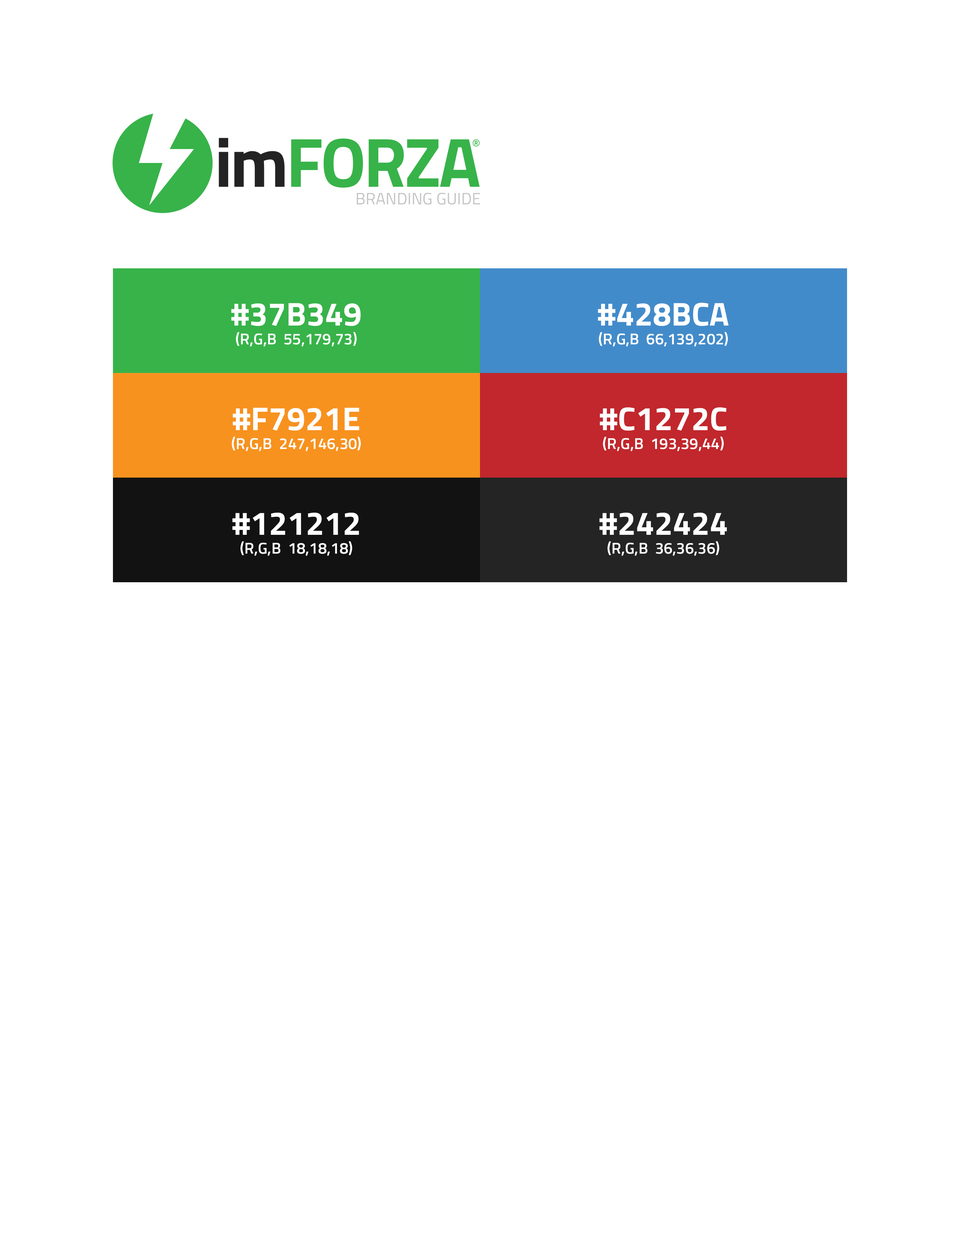
<style>
.page{position:relative;width:960px;height:1242px;background:#ffffff}
.page>*{position:absolute;margin:0}
.t1{font:16.5px "TitilliumWeb-Regular";color:#c4c4c4;text-transform:uppercase}
.t2{font:15.7px "TitilliumWeb-SemiBold";color:#ffffff;text-transform:uppercase}
.t3{font:32.9px "TitilliumWeb-Bold";color:#ffffff;text-transform:uppercase}
</style>
<div class="page">
<p class="t1" style="left:356px;top:193px;width:124px;height:12px">Branding Guide</p>
<p class="t2" style="left:231px;top:303px;width:130px;height:44px;text-align:center"><span class="t3">#37b349<br></span>(R,G,B  55,179,73)</p>
<p class="t2" style="left:598px;top:303px;width:131px;height:44px;text-align:center"><span class="t3">#428bca<br></span>(R,G,B  66,139,202)</p>
<p class="t2" style="left:232px;top:408px;width:129px;height:43px;text-align:center"><span class="t3">#f7921e<br></span>(R,G,B  247,146,30)</p>
<p class="t2" style="left:600px;top:407px;width:127px;height:44px;text-align:center"><span class="t3">#c1272c<br></span>(R,G,B  193,39,44)</p>
<p class="t2" style="left:232px;top:513px;width:127px;height:43px;text-align:center"><span class="t3">#121212<br></span>(R,G,B  18,18,18)</p>
<p class="t2" style="left:599px;top:513px;width:128px;height:43px;text-align:center"><span class="t3">#242424<br></span>(R,G,B  36,36,36)</p>
</div>
